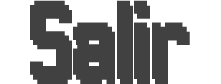
<style>
.page{position:relative;width:221px;height:84px;background:#ffffff}
.page>*{position:absolute;margin:0}
.t1{font:100px "Hannover-Messe-Sans";color:#414141}
</style>
<div class="page">
<p class="t1" style="left:30px;top:0px;width:157px;height:79px">Salir</p>
<p class="t1" style="left:33px;top:5px;width:157px;height:79px">Salir</p>
</div>
